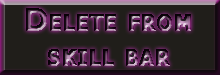
<style>
.page{position:relative;width:220px;height:75px;background:#201e1a}
.page>*{position:absolute;margin:0}
.t1{font:30px "Tahoma-Bold";font-variant:small-caps;font-weight:bold}
</style>
<div class="page">
<p class="t1" style="left:26px;top:8px;width:165px;height:58px;text-align:center">Delete from<br>skill bar</p>
</div>
